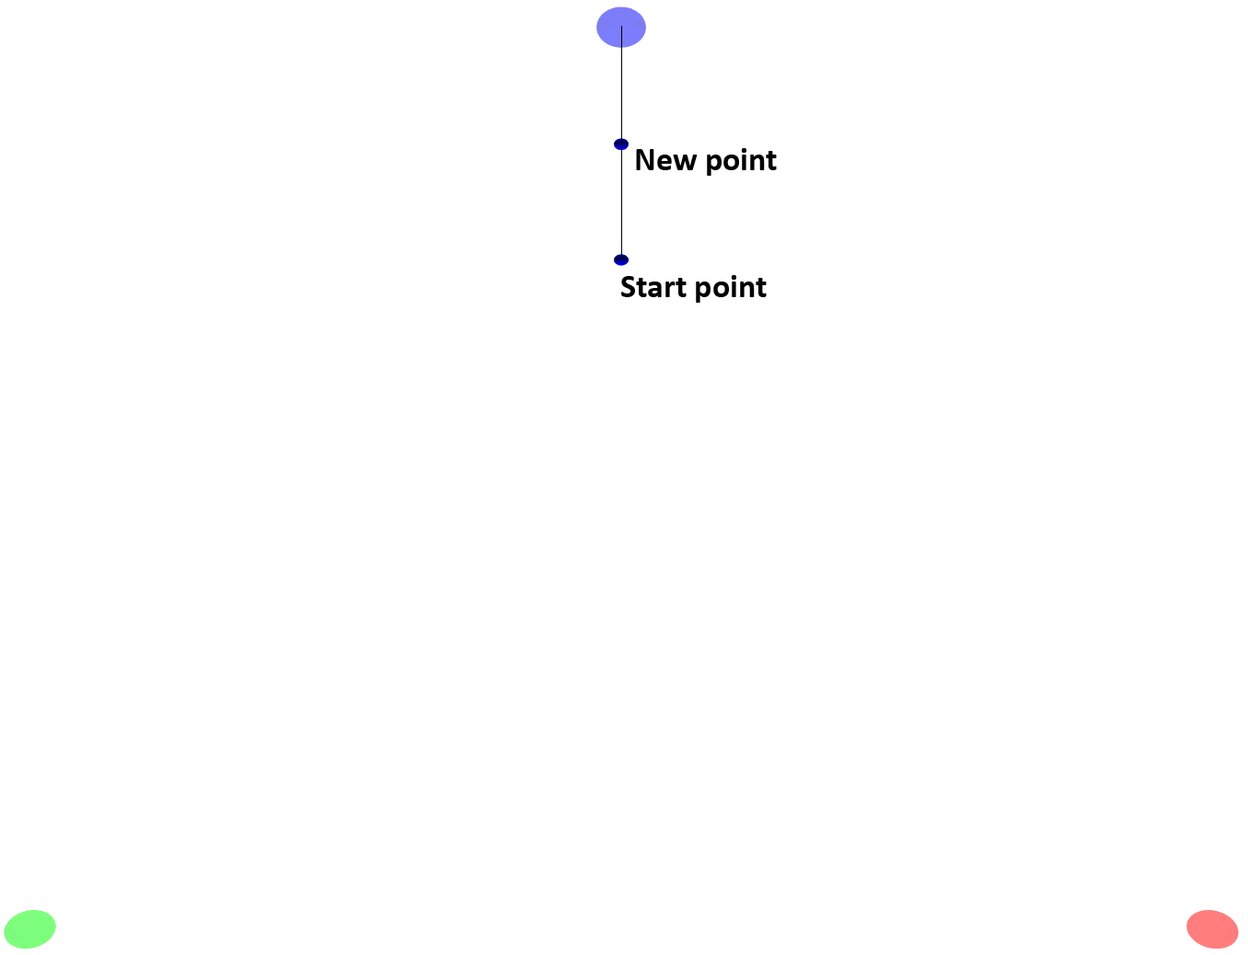
<style>
.page{position:relative;width:1248px;height:955px;background:#ffffff}
.page>*{position:absolute;margin:0}
.t1{font:33.1px "Calibri-Bold";color:#000000}
</style>
<div class="page">
<p class="t1" style="left:636px;top:148px;width:141px;height:28px">New point</p>
<p class="t1" style="left:621px;top:275px;width:146px;height:28px">Start point</p>
</div>
